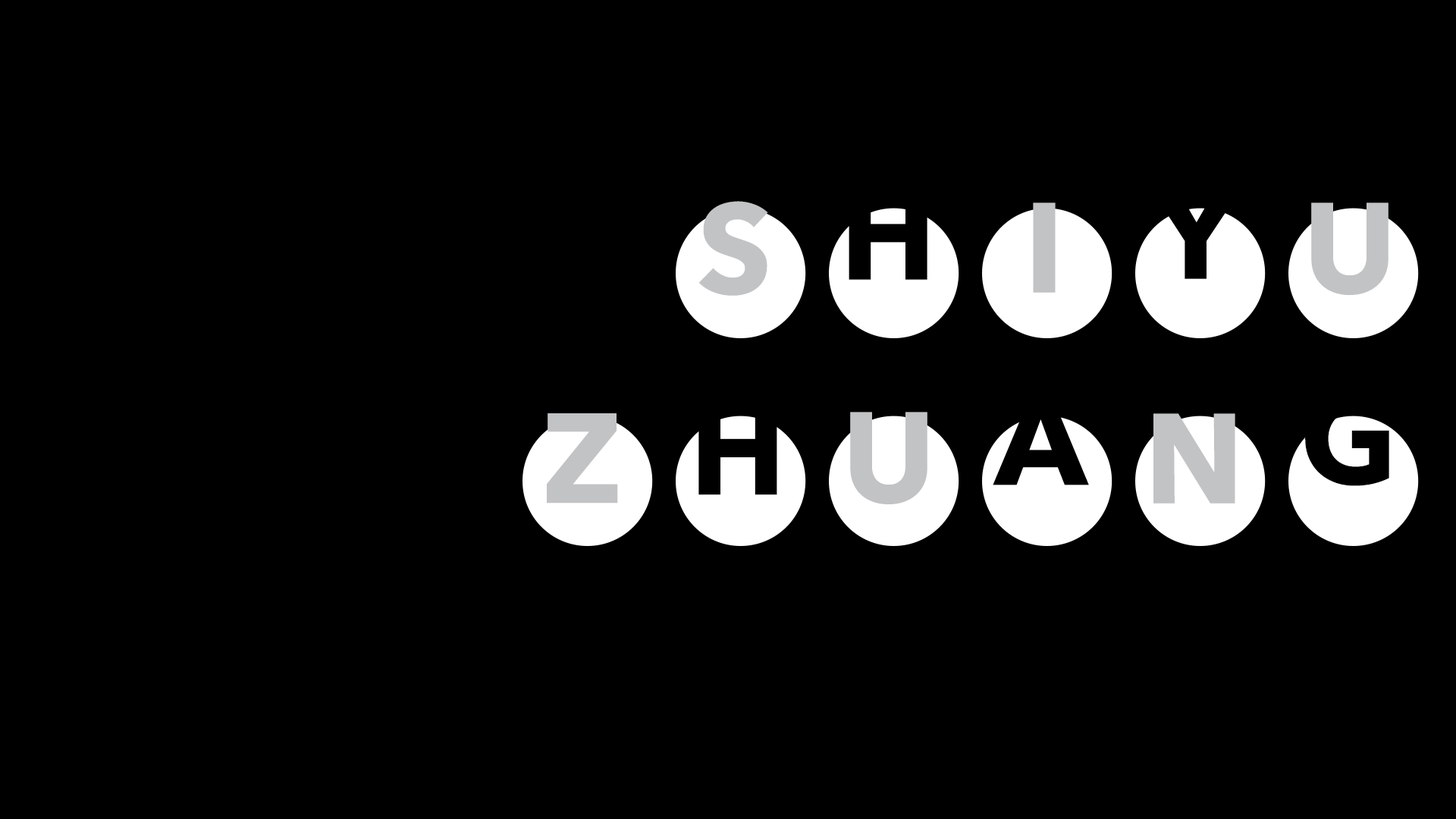
<style>
.page{position:relative;width:1456px;height:819px;background:#000000}
.page>*{position:absolute;margin:0}
.t1{font:126.4px "AvenirNext-Bold";color:#000000}
.t2{font:126.4px "AvenirNext-Bold";color:#c2c3c4}
</style>
<div class="page">
<p class="t1" style="left:849px;top:190px;width:78px;height:90px">H</p>
<p class="t1" style="left:1151px;top:189px;width:90px;height:90px">Y</p>
<p class="t2" style="left:1311px;top:202px;width:77px;height:93px">U</p>
<p class="t1" style="left:993px;top:395px;width:96px;height:90px">A</p>
<p class="t1" style="left:1305px;top:391px;width:84px;height:95px">G</p>
<p class="t2" style="left:547px;top:413px;width:71px;height:91px">Z</p>
<p class="t1" style="left:698px;top:405px;width:79px;height:90px">H</p>
<p class="t2" style="left:850px;top:412px;width:77px;height:92px">U</p>
<p class="t2" style="left:1153px;top:413px;width:82px;height:91px">N</p>
</div>
